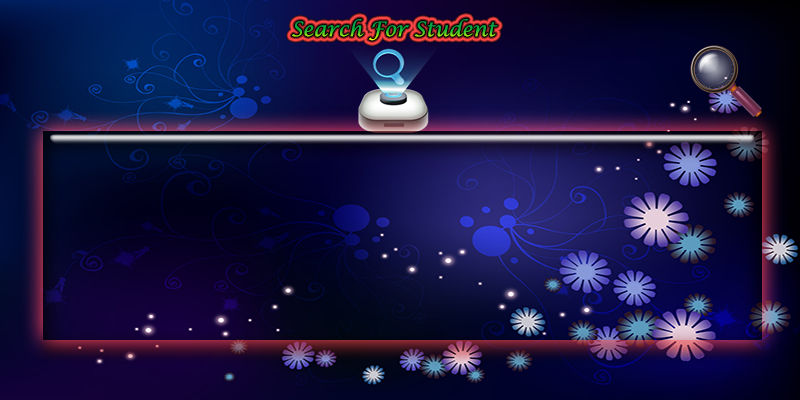
<style>
.page{position:relative;width:800px;height:400px}
.page>*{position:absolute;margin:0}
.t1{font:20px "LucidaCalligraphy-Italic"}
</style>
<div class="page">
<p class="t1" style="left:292px;top:18px;width:206px;height:23px">Search For Student</p>
</div>
